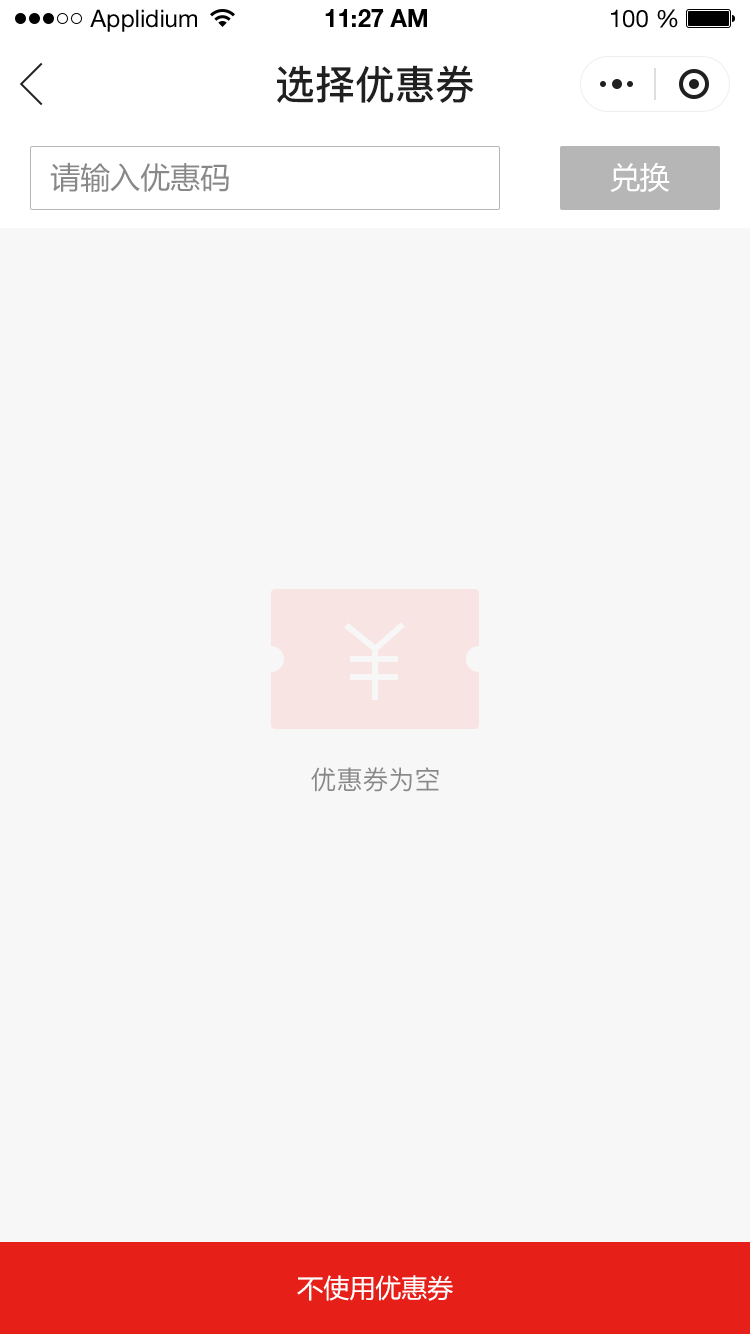
<style>
.page{position:relative;width:750px;height:1334px;background:#f7f7f7}
.page>*{position:absolute;margin:0}
.t1{font:24px "HelveticaNeueLTStd-Roman";color:#000000}
.t2{font:24px "HelveticaNeueLTStd-Bd";color:#000000}
.t3{font:40px "PingFang-SC-Bold";color:#202020;text-transform:uppercase}
.t4{font:30px "MicrosoftYaHei";color:#888888;text-transform:uppercase}
.t5{font:30px "MicrosoftYaHei";color:#ffffff;text-transform:uppercase}
.t6{font:26px "PingFang-SC-Medium";color:#888888;text-transform:uppercase}
.t7{font:26px "MicrosoftYaHei";color:#ffffff;text-transform:uppercase}
</style>
<div class="page">
<p class="t1" style="left:90px;top:9px;width:107px;height:23px">Applidium</p>
<p class="t2" style="left:325px;top:9px;width:102px;height:18px">11:27 AM</p>
<p class="t1" style="left:611px;top:9px;width:67px;height:19px">100 %</p>
<p class="t3" style="left:277px;top:65px;width:197px;height:38px">选择优惠券</p>
<p class="t4" style="left:50px;top:162px;width:179px;height:30px">请输入优惠码</p>
<p class="t5" style="left:610px;top:162px;width:60px;height:30px">兑换</p>
<p class="t6" style="left:311px;top:767px;width:128px;height:25px">优惠券为空</p>
<p class="t7" style="left:297px;top:1275px;width:156px;height:26px">不使用优惠券</p>
</div>
